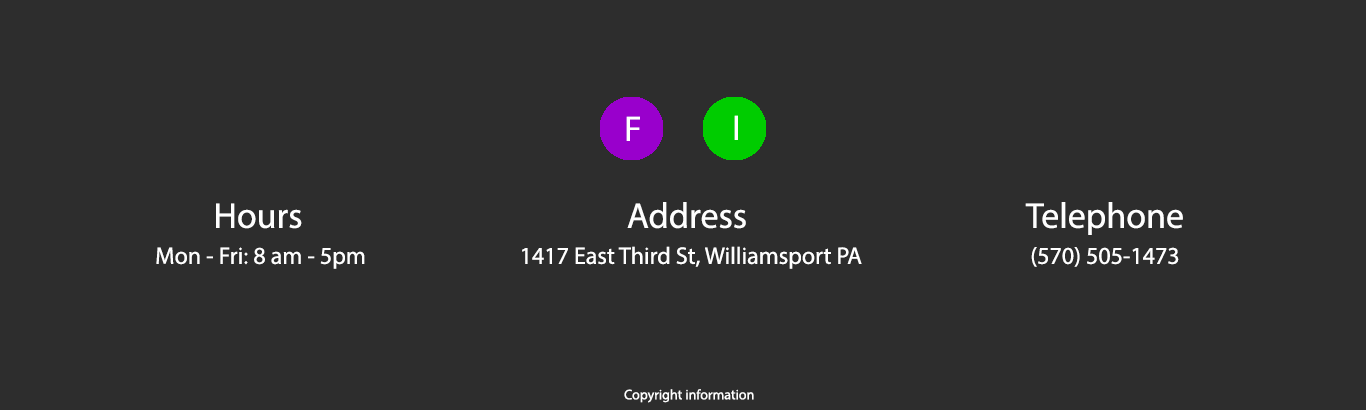
<style>
.page{position:relative;width:1366px;height:412px;background:#2d2d2d}
.page>*{position:absolute;margin:0}
.t1{font:36px "MyriadPro-Regular";color:#ffffff}
.t2{font:24px/36px "MyriadPro-Regular";color:#ffffff}
.t3{font:36px/36px "MyriadPro-Regular";color:#ffffff}
.t4{font:14px "MyriadPro-Regular";color:#ffffff}
</style>
<div class="page">
<p class="t1" style="left:626px;top:116px;width:14px;height:25px">F</p>
<p class="t1" style="left:734px;top:115px;width:4px;height:25px">I</p>
<p class="t2" style="left:156px;top:203px;width:209px;height:66px;text-align:center"><span class="t3">Hours<br></span> Mon - Fri: 8 am - 5pm</p>
<p class="t2" style="left:522px;top:202px;width:340px;height:67px;text-align:center"><span class="t3">Address<br> </span>1417 East Third St, Williamsport PA</p>
<p class="t2" style="left:1025px;top:202px;width:158px;height:65px;text-align:center"><span class="t3">Telephone<br></span>(570) 505-1473</p>
<p class="t4" style="left:624px;top:389px;width:130px;height:14px">Copyright information</p>
</div>
